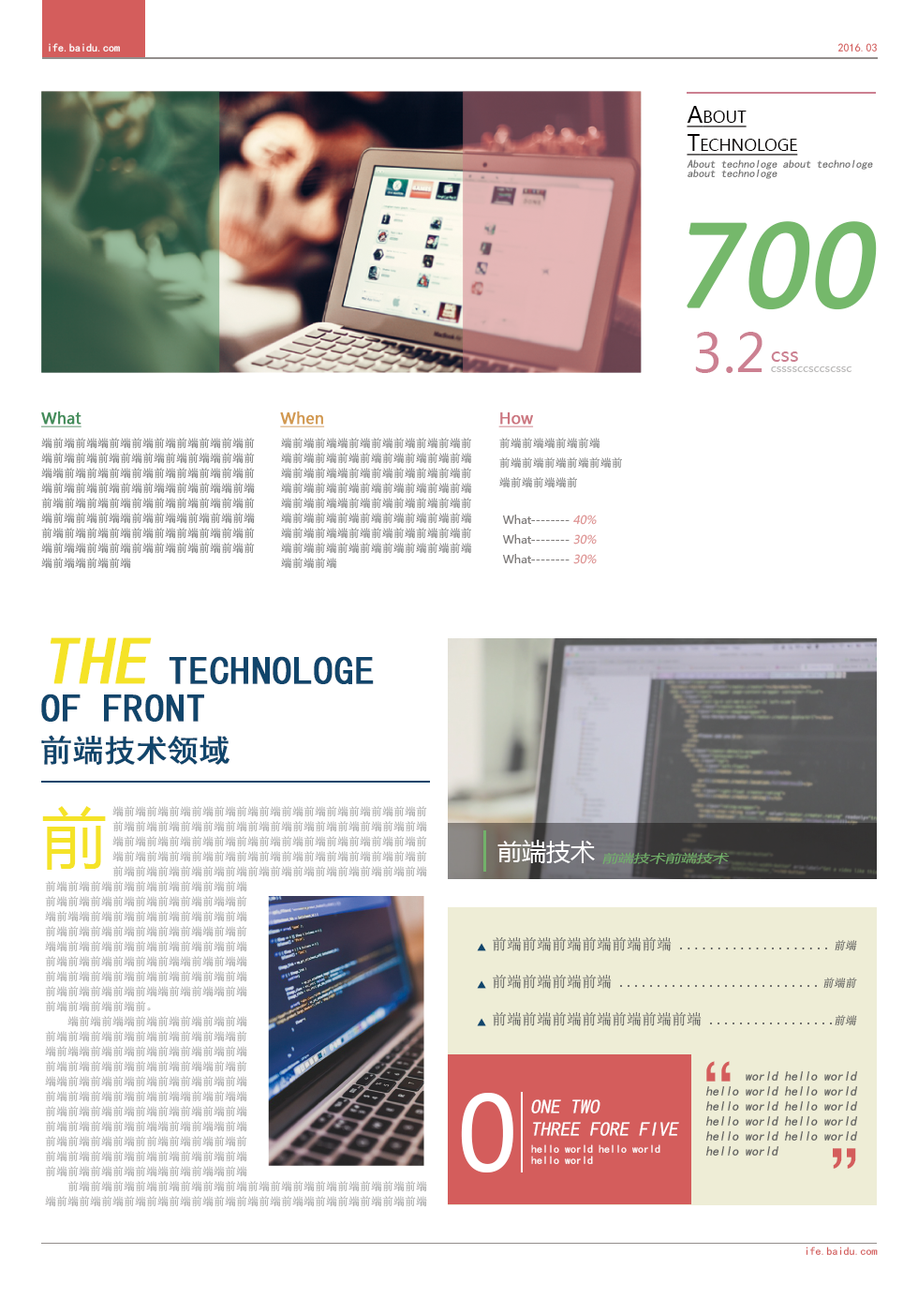
<style>
.page{position:relative;width:918px;height:1299px;background:#ffffff}
.page>*{position:absolute;margin:0}
.t1{font:11.2px "SimHei";color:#ffffff}
.t2{font:11.2px "SimHei";color:#d45d5c}
.t3{font:22.5px/28.1px "MicrosoftYaHei";color:#040000;font-variant:small-caps;text-decoration:underline}
.t4{font:11.2px/9.4px "KaiTi";color:#676767;font-style:italic}
.t5{font:108.7px "MicrosoftYaHei";color:#75b86b;font-weight:bold;font-style:italic}
.t6{font:51.5px "MicrosoftYaHei";color:#cc8091}
.t7{font:19.7px "MicrosoftYaHei";color:#cc8091}
.t8{font:11.2px "MicrosoftYaHei";color:#bcbbba}
.t9{font:15px "MicrosoftYaHei";color:#418c59;font-weight:bold;text-decoration:underline}
.t10{font:15px "MicrosoftYaHei";color:#d2994f;font-weight:bold;text-decoration:underline}
.t11{font:15px "MicrosoftYaHei";color:#cc7680;font-weight:bold;text-decoration:underline}
.t12{font:11.2px/15px "SimSun";color:#767777}
.t13{font:11.2px/19.7px "SimSun";color:#767777}
.t14{font:11.2px/19.7px "MicrosoftYaHei";color:#7e7b7a}
.t15{font:11.2px/19.7px "MicrosoftYaHei";color:#7e7b7a;font-style:italic}
.t16{font:39.4px/37.5px "SimHei";color:#11456b;font-weight:bold}
.t17{font:67.5px/36.9px "SimHei";color:#f5e327;font-weight:bold;font-style:italic}
.t18{font:30.9px "SimHei";color:#11456b;font-weight:bold}
.t19{font:65.6px "MicrosoftYaHei";color:#f5e327}
.t20{font:24.4px "MicrosoftYaHei";color:#ffffff}
.t21{font:11.2px "MicrosoftYaHei";color:#72b16a;font-style:italic;scale:1.4 1}
.t22{font:15px/18.7px "SimSun";color:#5a5b5b}
.t23{font:11.2px/18.7px "SimSun";font-style:italic}
.t24{font:67.5px "SimHei";color:#d45d5c}
.t25{font:13.1px/15px "SimHei";color:#5a5b5b;font-style:italic}
.t26{font:103.1px "MicrosoftYaHei";color:#ffffff}
.t27{font:19.7px/22.5px "SimHei";color:#ffffff;font-style:italic}
.t28{font:11.2px/5.6px "SimHei";color:#ffffff}
</style>
<div class="page">
<p class="t1" style="left:49px;top:43px;width:71px;height:9px">ife.baidu.com</p>
<p class="t2" style="left:838px;top:43px;width:39px;height:9px">2016.03</p>
<p class="t3" style="left:687px;top:106px;width:111px;height:50px">About<br>Technologe</p>
<p class="t4" style="left:687px;top:159px;width:186px;height:20px">About technologe about technologe <br>about technologe</p>
<p class="t5" style="left:687px;top:221px;width:190px;height:89px">700</p>
<p class="t6" style="left:695px;top:332px;width:68px;height:41px">3.2</p>
<p class="t7" style="left:771px;top:351px;width:27px;height:11px">css</p>
<p class="t8" style="left:771px;top:366px;width:81px;height:6px">cssssccsccscssc</p>
<p class="t9" style="left:41px;top:411px;width:41px;height:16px">What</p>
<p class="t10" style="left:280px;top:411px;width:45px;height:16px">When</p>
<p class="t11" style="left:498px;top:412px;width:36px;height:15px">How</p>
<p class="t12" style="left:41px;top:438px;width:214px;height:131px">端前端前端端前端前端前端前端前端前端前<br>端前端前端前端前端前端前端前端端前端前<br>端端前端前端前端前端前端前端前端前端前<br>端前端前端前端前端前端端前端前端端前端<br>前端前端前端前端前端前端前端前端前端前<br>端前端前端前端端前端前端端前端前端前端<br>前端前端前端前端前端前端前端前端前端前<br>端前端端前端前端前端前端前端前端前端前<br>端前端端前端前端</p>
<p class="t12" style="left:281px;top:438px;width:191px;height:131px">端前端前端端前端前端前端前端前端前<br>端前端前端前端前端前端前端前端前端<br>端前端前端端前端前端前端前端前端前<br>端前端前端前端前端前端前端前端前端<br>端前端前端端前端前端前端前端前端前<br>端前端前端前端前端前端前端前端前端<br>端前端前端端前端前端前端前端前端前<br>端前端前端前端前端前端前端前端前端<br>端前端前端</p>
<p class="t13" style="left:499px;top:438px;width:123px;height:50px">前端前端端前端前端<br>前端前端前端前端前端前<br>端前端前端端前</p>
<p class="t14" style="left:502px;top:514px;width:95px;height:50px">What-------- <span class="t15">40%<br></span>What-------- <span class="t15">30%<br></span>What-------- <span class="t15">30%</span></p>
<p class="t16" style="left:41px;top:637px;width:333px;height:84px"><span class="t17">THE </span>TECHNOLOGE<br>OF FRONT</p>
<p class="t18" style="left:41px;top:735px;width:189px;height:30px">前端技术领域</p>
<p class="t19" style="left:42px;top:806px;width:64px;height:64px">前</p>
<p class="t20" style="left:498px;top:840px;width:97px;height:23px">前端技术</p>
<p class="t21" style="left:602px;top:852px;width:128px;height:12px">前端技术前端技术</p>
<p class="t22" style="left:493px;top:936px;width:339px;height:90px">前端前端前端前端前端前端 ....................<br><br>前端前端前端前端 ...........................<br><br>前端前端前端前端前端前端前端 .................</p>
<p class="t23" style="left:824px;top:940px;width:33px;height:86px;text-align:right">前端<br><br>前端前<br><br>前端</p>
<p class="t24" style="left:706px;top:1061px;width:10px;height:20px">‘</p>
<p class="t24" style="left:721px;top:1061px;width:10px;height:20px">‘</p>
<p class="t25" style="left:706px;top:1071px;width:152px;height:84px">world hello world<br>hello world hello world<br>hello world hello world<br>hello world hello world<br>hello world hello world<br>hello world</p>
<p class="t26" style="left:461px;top:1092px;width:52px;height:80px">0</p>
<p class="t27" style="left:531px;top:1099px;width:148px;height:37px">ONE TWO <br>THREE FORE FIVE</p>
<p class="t28" style="left:531px;top:1144px;width:130px;height:20px">hello world hello world <br><br>hello world</p>
<p class="t24" style="left:833px;top:1148px;width:9px;height:20px">’</p>
<p class="t24" style="left:847px;top:1148px;width:9px;height:20px">’</p>
<p class="t2" style="left:806px;top:1246px;width:72px;height:9px">ife.baidu.com</p>
</div>
